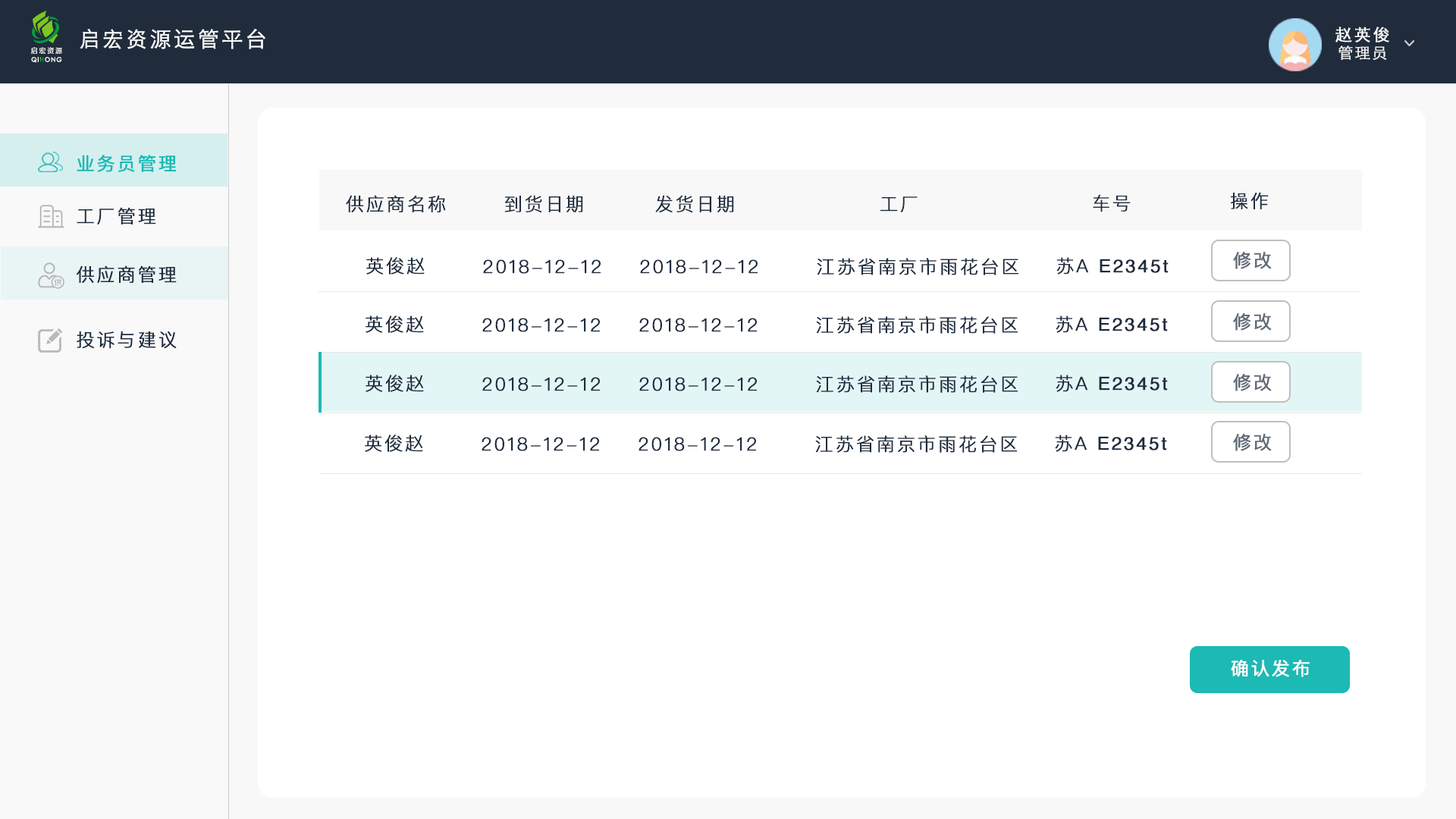
<style>
.page{position:relative;width:1456px;height:819px;background:#ffffff}
.page>*{position:absolute;margin:0}
.t1{font:21.2px "STHeitiSC-Light";letter-spacing:0.1em;color:#ffffff;font-weight:bold}
.t2{font:16.7px "STHeitiSC-Light";letter-spacing:0.1em;color:#ffffff;font-weight:bold}
.t3{font:7px "FZLTZHK--GBK1-0";letter-spacing:0.18em;color:#ffffff}
.t4{font:15.2px "STHeitiSC-Light";letter-spacing:0.1em;color:#ffffff;font-weight:bold}
.t5{font:6.3px "CenturyGothic";letter-spacing:0.1em;color:#ffffff;font-weight:bold}
.t6{font:18.2px "PingFangSC-Regular";letter-spacing:0.1em;color:#1cb9b5;font-weight:bold}
.t7{font:18.2px "PingFangSC-Light";letter-spacing:0.1em;color:#1e2c3e;font-weight:bold}
.t8{font:18.2px "Helvetica";letter-spacing:0.1em;color:#1e2c3e;font-weight:bold}
.t9{font:18.2px "PingFangSC-Regular";letter-spacing:0.1em;color:#626b78;font-weight:bold}
.t10{font:18.2px "PingFangSC-Regular";letter-spacing:0.1em;color:#ffffff;font-weight:bold}
</style>
<div class="page">
<p class="t1" style="left:80px;top:29px;width:185px;height:20px">启宏资源运管平台</p>
<p class="t2" style="left:1335px;top:27px;width:54px;height:15px">赵英俊</p>
<p class="t3" style="left:31px;top:47px;width:31px;height:7px">启宏资源</p>
<p class="t4" style="left:1338px;top:45px;width:49px;height:15px;opacity:0.9">管理员</p>
<p class="t5" style="left:31px;top:57px;width:31px;height:6px">QI  ONG</p>
<p class="t6" style="left:77px;top:155px;width:100px;height:17px">业务员管理</p>
<p class="t7" style="left:346px;top:195px;width:100px;height:17px">供应商名称</p>
<p class="t7" style="left:504px;top:195px;width:79px;height:18px">到货日期</p>
<p class="t7" style="left:655px;top:195px;width:79px;height:18px">发货日期</p>
<p class="t7" style="left:880px;top:196px;width:38px;height:16px">工厂</p>
<p class="t7" style="left:1093px;top:194px;width:38px;height:18px">车号</p>
<p class="t7" style="left:1231px;top:192px;width:38px;height:17px">操作</p>
<p class="t7" style="left:77px;top:207px;width:79px;height:17px">工厂管理</p>
<p class="t7" style="left:366px;top:257px;width:59px;height:18px">英俊赵</p>
<p class="t7" style="left:817px;top:258px;width:201px;height:17px">江苏省南京市雨花台区</p>
<p class="t8" style="left:1056px;top:257px;width:113px;height:18px"><span class="t7">苏A </span>E2345t</p>
<p class="t9" style="left:1233px;top:252px;width:39px;height:17px">修改</p>
<p class="t7" style="left:77px;top:265px;width:100px;height:18px">供应商管理</p>
<p class="t7" style="left:483px;top:259px;width:118px;height:15px">2018-12-12</p>
<p class="t7" style="left:640px;top:259px;width:118px;height:15px">2018-12-12</p>
<p class="t7" style="left:366px;top:315px;width:58px;height:18px">英俊赵</p>
<p class="t7" style="left:482px;top:318px;width:118px;height:14px">2018-12-12</p>
<p class="t7" style="left:639px;top:318px;width:118px;height:14px">2018-12-12</p>
<p class="t7" style="left:816px;top:316px;width:202px;height:18px">江苏省南京市雨花台区</p>
<p class="t8" style="left:1056px;top:315px;width:112px;height:18px"><span class="t7">苏A </span>E2345t</p>
<p class="t9" style="left:1233px;top:313px;width:39px;height:18px">修改</p>
<p class="t7" style="left:77px;top:331px;width:100px;height:18px">投诉与建议</p>
<p class="t7" style="left:366px;top:375px;width:58px;height:17px">英俊赵</p>
<p class="t7" style="left:482px;top:377px;width:118px;height:14px">2018-12-12</p>
<p class="t7" style="left:639px;top:377px;width:118px;height:14px">2018-12-12</p>
<p class="t7" style="left:816px;top:375px;width:202px;height:18px">江苏省南京市雨花台区</p>
<p class="t8" style="left:1056px;top:375px;width:112px;height:17px"><span class="t7">苏A </span>E2345t</p>
<p class="t9" style="left:1233px;top:374px;width:39px;height:17px">修改</p>
<p class="t7" style="left:365px;top:435px;width:58px;height:17px">英俊赵</p>
<p class="t7" style="left:482px;top:437px;width:117px;height:14px">2018-12-12</p>
<p class="t7" style="left:639px;top:437px;width:117px;height:14px">2018-12-12</p>
<p class="t7" style="left:815px;top:435px;width:202px;height:18px">江苏省南京市雨花台区</p>
<p class="t8" style="left:1055px;top:435px;width:112px;height:17px"><span class="t7">苏A </span>E2345t</p>
<p class="t9" style="left:1233px;top:434px;width:39px;height:17px">修改</p>
<p class="t10" style="left:1231px;top:660px;width:79px;height:17px">确认发布</p>
</div>
